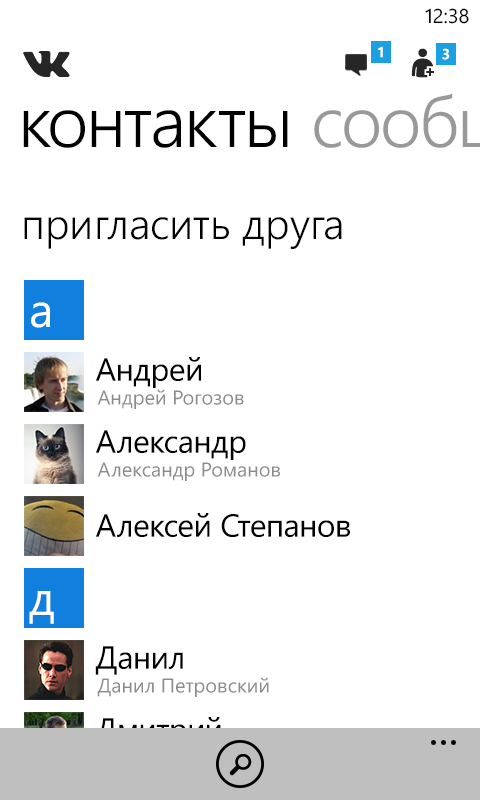
<style>
.page{position:relative;width:480px;height:800px;background:#ffffff}
.page>*{position:absolute;margin:0}
.t1{font:20px "SegoeWP";color:#000000}
.t2{font:14.7px "SegoeWP-Bold";color:#ffffff}
.t3{font:42.7px "SegoeWP-SemiLight";color:#000000}
.t4{font:48px "SegoeWP";color:#ffffff}
.t5{font:32px "SegoeWP";letter-spacing:-0.01em;color:#000000}
</style>
<div class="page">
<p class="t1" style="left:425px;top:8px;width:44px;height:16px">12:38</p>
<p class="t2" style="left:378px;top:46px;width:5px;height:12px">1</p>
<p class="t2" style="left:442px;top:48px;width:8px;height:12px">3</p>
<p class="t3" style="left:24px;top:217px;width:318px;height:32px">пригласить друга</p>
<p class="t4" style="left:31px;top:302px;width:19px;height:26px">а</p>
<p class="t5" style="left:96px;top:357px;width:105px;height:31px">Андрей</p>
<p class="t5" style="left:96px;top:430px;width:150px;height:30px">Александр</p>
<p class="t5" style="left:96px;top:513px;width:254px;height:25px">Алексей Степанов</p>
<p class="t4" style="left:29px;top:591px;width:25px;height:33px">д</p>
<p class="t5" style="left:95px;top:646px;width:88px;height:29px">Данил</p>
<p class="t5" style="left:95px;top:717px;width:126px;height:31px">Дмитрий</p>
</div>
